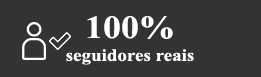
<style>
.page{position:relative;width:261px;height:77px;background:#333333}
.page>*{position:absolute;margin:0}
.t1{font:17.1px "TimesNewRomanPS-BoldMT";color:#ffffff;scale:1.11 1}
.t2{font:32.4px "TimesNewRomanPS-BoldMT";color:#ffffff;scale:1.11 1}
</style>
<div class="page">
<p class="t1" style="left:66px;top:16px;width:128px;height:49px;text-align:center"><span class="t2">100%<br></span>seguidores reais</p>
</div>
